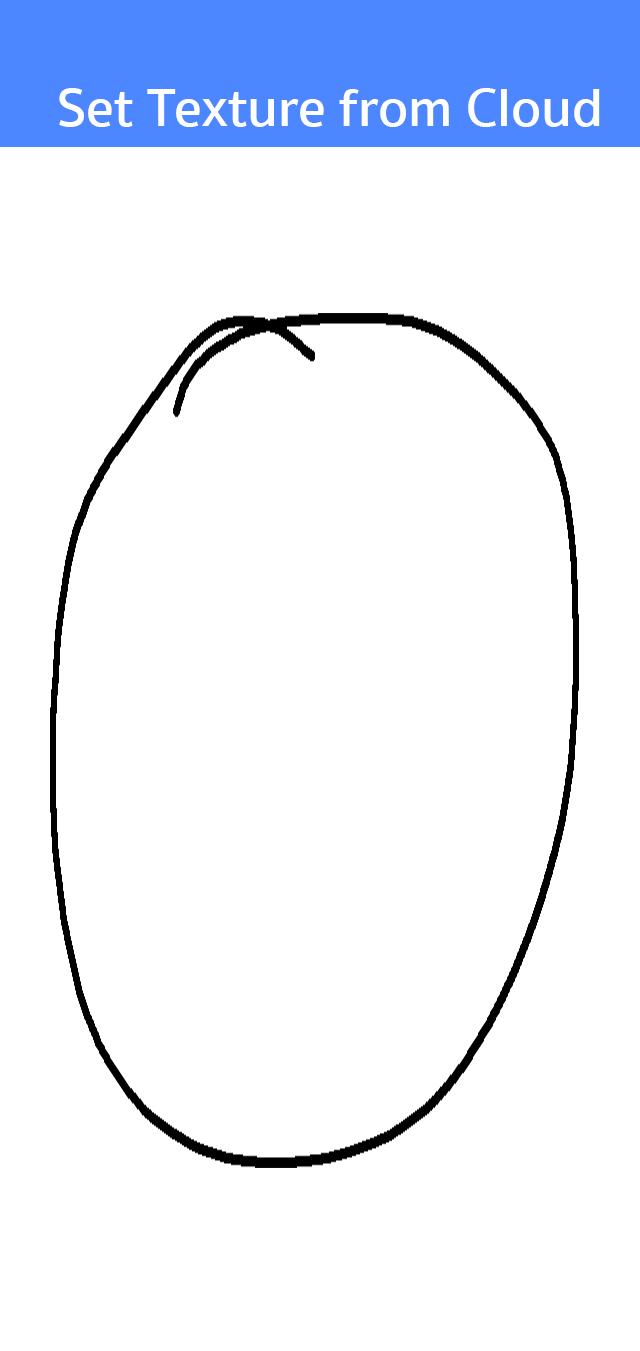
<style>
.page{position:relative;width:640px;height:1351px;background:#ffffff}
.page>*{position:absolute;margin:0}
.t1{font:54.8px "SukhumvitSet-SemiBold";color:#ffffff}
</style>
<div class="page">
<p class="t1" style="left:59px;top:88px;width:541px;height:39px">Set Texture from Cloud</p>
</div>
